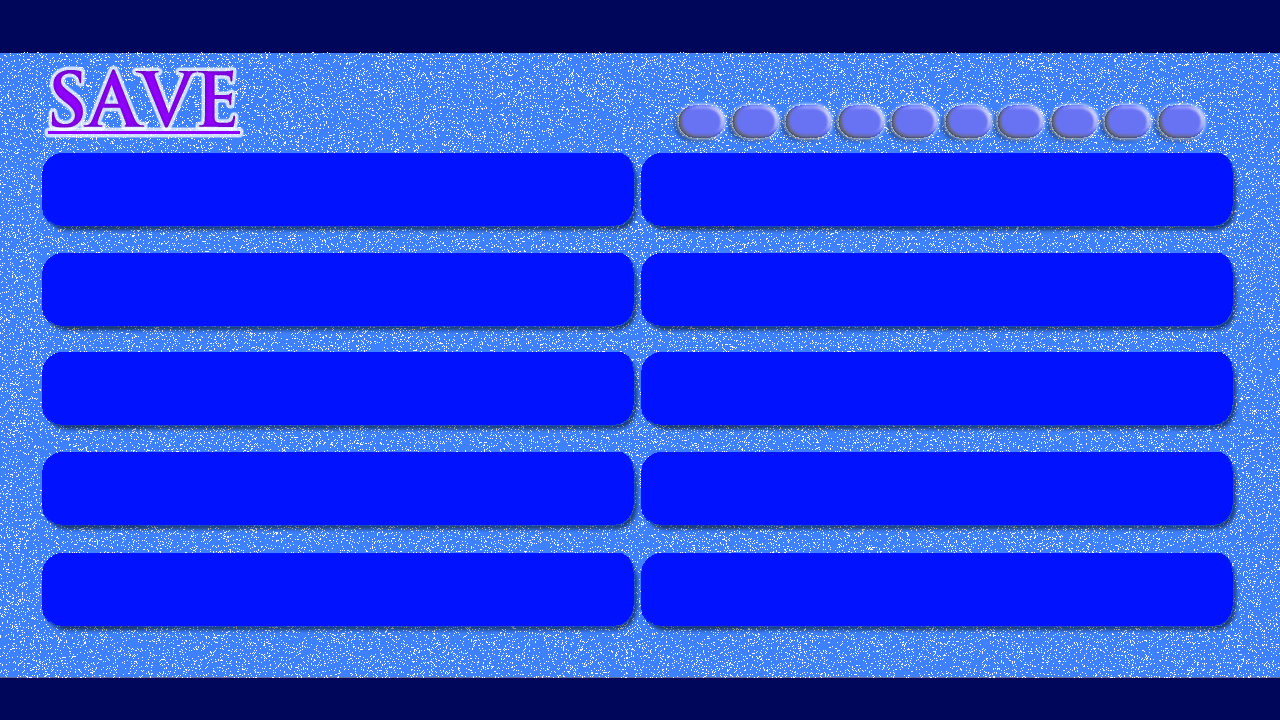
<style>
.page{position:relative;width:1280px;height:720px;background:#0012ff}
.page>*{position:absolute;margin:0}
.t1{font:73.6px "TrajanPro-Bold";color:#8400ea}
</style>
<div class="page">
<p class="t1" style="left:51px;top:69px;width:184px;height:59px">SAVE</p>
</div>
